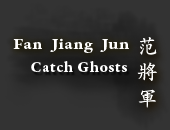
<style>
.page{position:relative;width:170px;height:130px;background:#333333}
.page>*{position:absolute;margin:0}
.t1{font:15.7px "GaramondPremrPro-BdCapt";letter-spacing:0.025em;color:#ffffff;scale:1.15 1}
.t2{font:21.1px/26px "AdobeKaitiStd-Regular";color:#ffffff}
.t3{font:15.9px "GaramondPremrPro-BdCapt";letter-spacing:0.025em;color:#ffffff}
</style>
<div class="page">
<p class="t1" style="left:13px;top:38px;width:116px;height:15px">Fan  Jiang  Jun</p>
<p class="t2" style="left:137px;top:37px;width:20px;height:71px;text-align:center">范<br>將<br>軍</p>
<p class="t3" style="left:31px;top:61px;width:96px;height:11px">Catch Ghosts</p>
</div>
